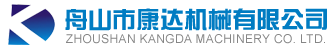
<style>
.page{position:relative;width:330px;height:50px;background:#ffffff}
.page>*{position:absolute;margin:0}
.t1{font:24px "FZZYJW--GB1-0";color:#007cc2}
.t2{font:12px "ArialMT";letter-spacing:0.03em;color:#868686;text-transform:uppercase}
</style>
<div class="page">
<p class="t1" style="left:65px;top:8px;width:262px;height:23px">舟山市康达机械有限公司</p>
<p class="t2" style="left:66px;top:34px;width:259px;height:10px">Zhoushan kangda Machinery Co. Ltd.</p>
</div>
